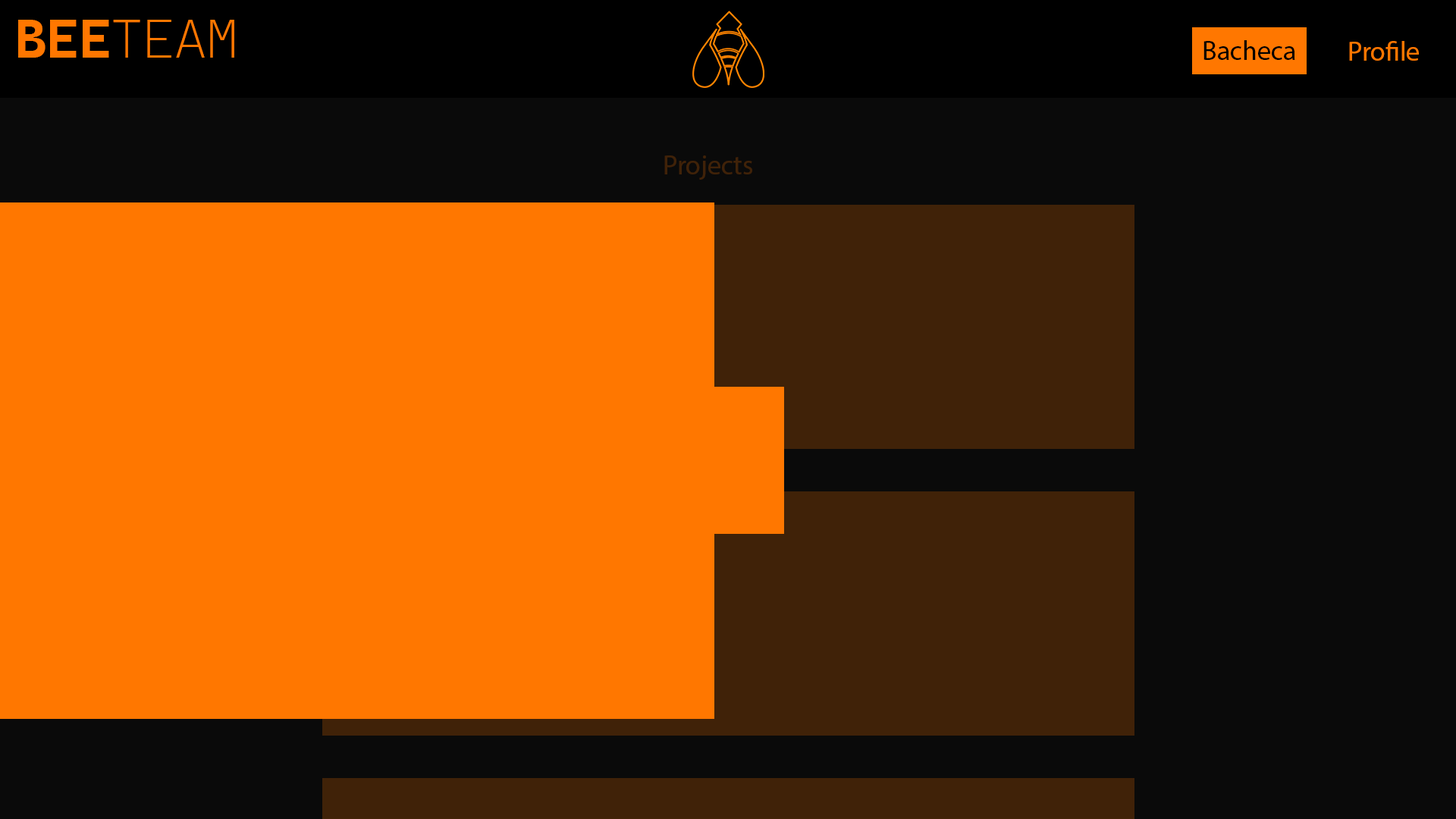
<style>
.page{position:relative;width:1456px;height:819px;background:#0a0a0a}
.page>*{position:absolute;margin:0}
.t1{font:54.6px "CascadiaCodeRoman-ExtraLight";color:#ff7700}
.t2{font:54.6px "CascadiaCodeRoman-Bold";color:#ff7700}
.t3{font:27.3px "MyriadPro-Regular";color:#000000}
.t4{font:27.3px "MyriadPro-Regular";color:#ff7700}
.t5{font:27.3px "MyriadPro-Regular";color:#402208}
</style>
<div class="page">
<p class="t1" style="left:18px;top:20px;width:216px;height:38px"><span class="t2">BEE</span>TEAM</p>
<p class="t3" style="left:1203px;top:40px;width:92px;height:20px">Bacheca</p>
<p class="t4" style="left:1349px;top:41px;width:70px;height:20px">Profile</p>
<p class="t5" style="left:664px;top:155px;width:88px;height:25px">Projects</p>
</div>
